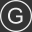
<style>
.page{position:relative;width:32px;height:32px;background:#333333}
.page>*{position:absolute;margin:0}
.t1{font:21.5px "ArialMT";color:#eeeeee}
</style>
<div class="page">
<p class="t1" style="left:8px;top:7px;width:15px;height:17px">G</p>
</div>
